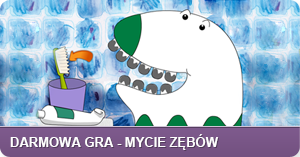
<style>
.page{position:relative;width:300px;height:157px;background:#ffffff}
.page>*{position:absolute;margin:0}
.t1{font:13px "Arial-BoldMT";color:#fefefe}
</style>
<div class="page">
<p class="t1" style="left:10px;top:134px;width:208px;height:16px">DARMOWA GRA - MYCIE ZĘBÓW</p>
</div>
